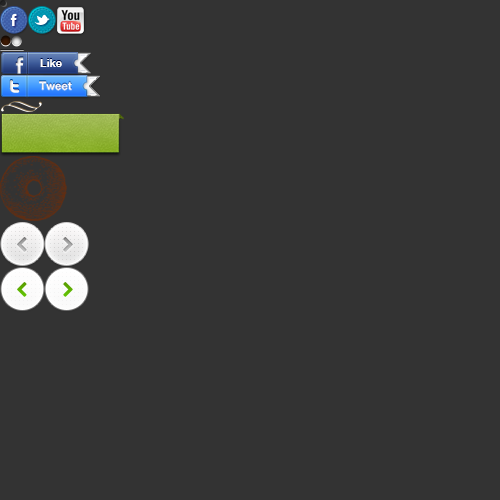
<style>
.page{position:relative;width:500px;height:500px;background:#333333}
.page>*{position:absolute;margin:0}
.t1{font:11px "HelveticaNeue-Bold";color:#ffffff}
</style>
<div class="page">
<p class="t1" style="left:40px;top:59px;width:22px;height:8px">Like</p>
<p class="t1" style="left:39px;top:81px;width:33px;height:10px">Tweet</p>
</div>
